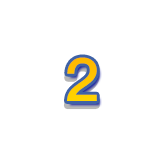
<style>
.page{position:relative;width:164px;height:164px;background:#ffffff}
.page>*{position:absolute;margin:0}
.t1{font:59.8px "PingFangHK-Semibold";color:#ffc800;text-transform:uppercase}
</style>
<div class="page">
<p class="t1" style="left:67px;top:57px;width:30px;height:44px">2</p>
</div>
